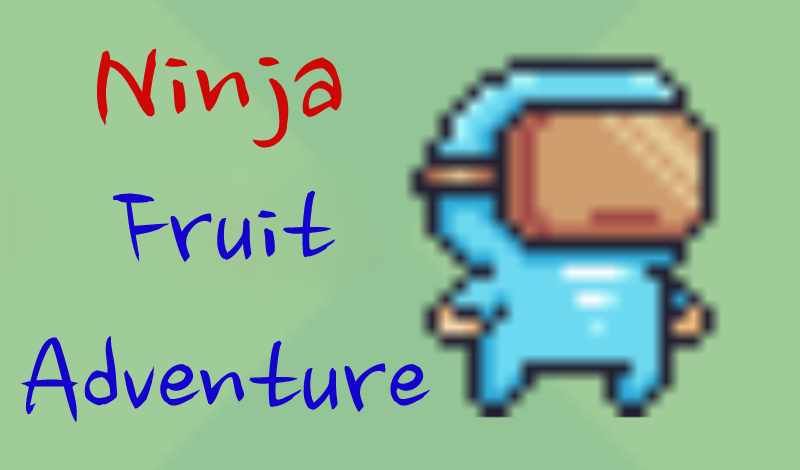
<style>
.page{position:relative;width:800px;height:470px;background:#9fcc98}
.page>*{position:absolute;margin:0}
.t1{font:150px "NanumBrush";color:#ce0707}
.t2{font:125px "NanumBrush";color:#1502cd}
</style>
<div class="page">
<p class="t1" style="left:96px;top:48px;width:246px;height:100px">Ninja</p>
<p class="t2" style="left:21px;top:190px;width:409px;height:233px;text-align:center">Fruit<br>Adventure</p>
</div>
